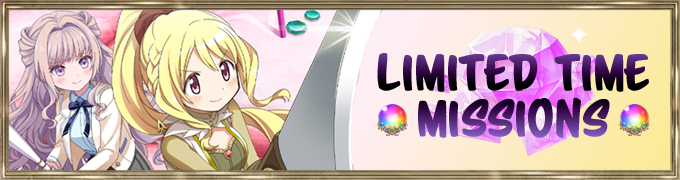
<style>
.page{position:relative;width:680px;height:180px}
.page>*{position:absolute;margin:0}
.t1{font:45.2px "ScriptoramaMarkdownJF-Regular";text-transform:uppercase;font-weight:bold}
</style>
<div class="page">
<p class="t1" style="left:377px;top:53px;width:272px;height:39px">limited time</p>
<p class="t1" style="left:418px;top:98px;width:192px;height:40px">missions</p>
</div>
